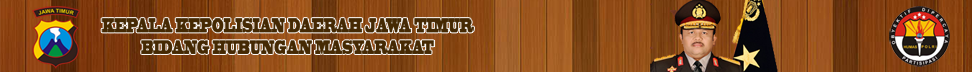
<style>
.page{position:relative;width:972px;height:72px}
.page>*{position:absolute;margin:0}
.t1{font:18px "BlackoakStd";color:#452903;scale:0.36 1}
</style>
<div class="page">
<p class="t1" style="left:101px;top:18px;width:373px;height:36px;text-align:center">KEPALA KEPOLISIAN DAERAH JAWA TIMUR<br>BIDANG HUBUNGAN MASYARAKAT</p>
</div>
